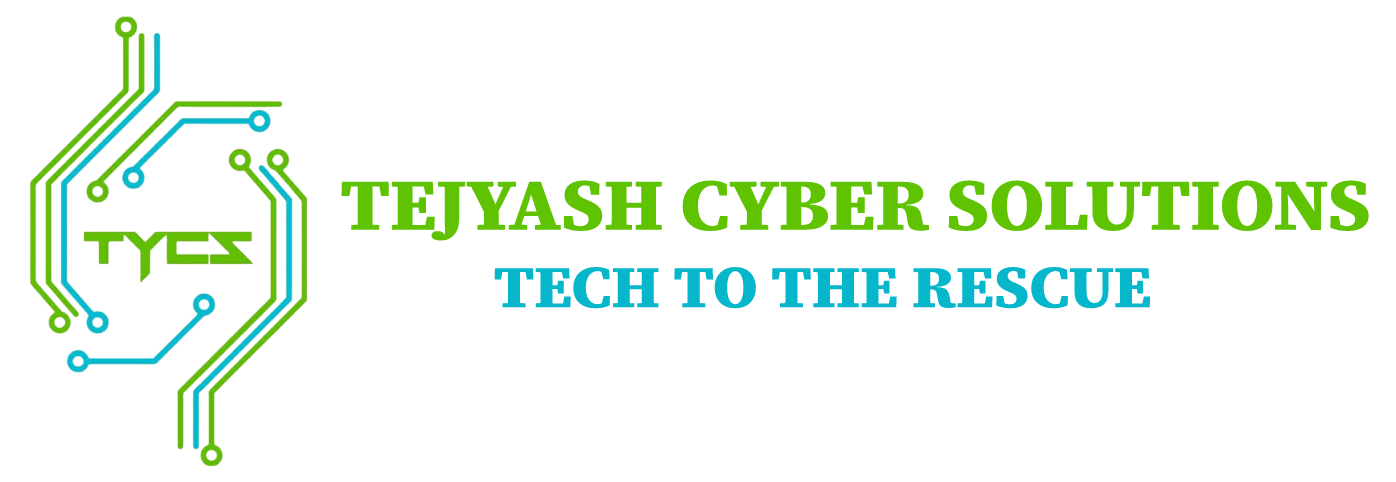
<style>
.page{position:relative;width:1396px;height:482px;background:#ffffff}
.page>*{position:absolute;margin:0}
.t1{font:125px "SourceSerif4-Bold";letter-spacing:-0.02em;color:#5fc301;font-weight:bold}
.t2{font:102px "SourceSerif4-Bold";letter-spacing:-0.02em;color:#06b7cb;font-weight:bold}
</style>
<div class="page">
<p class="t1" style="left:341px;top:180px;width:1028px;height:61px">TEJYASH CYBER SOLUTIONS</p>
<p class="t2" style="left:494px;top:267px;width:657px;height:42px">TECH TO THE RESCUE</p>
</div>
